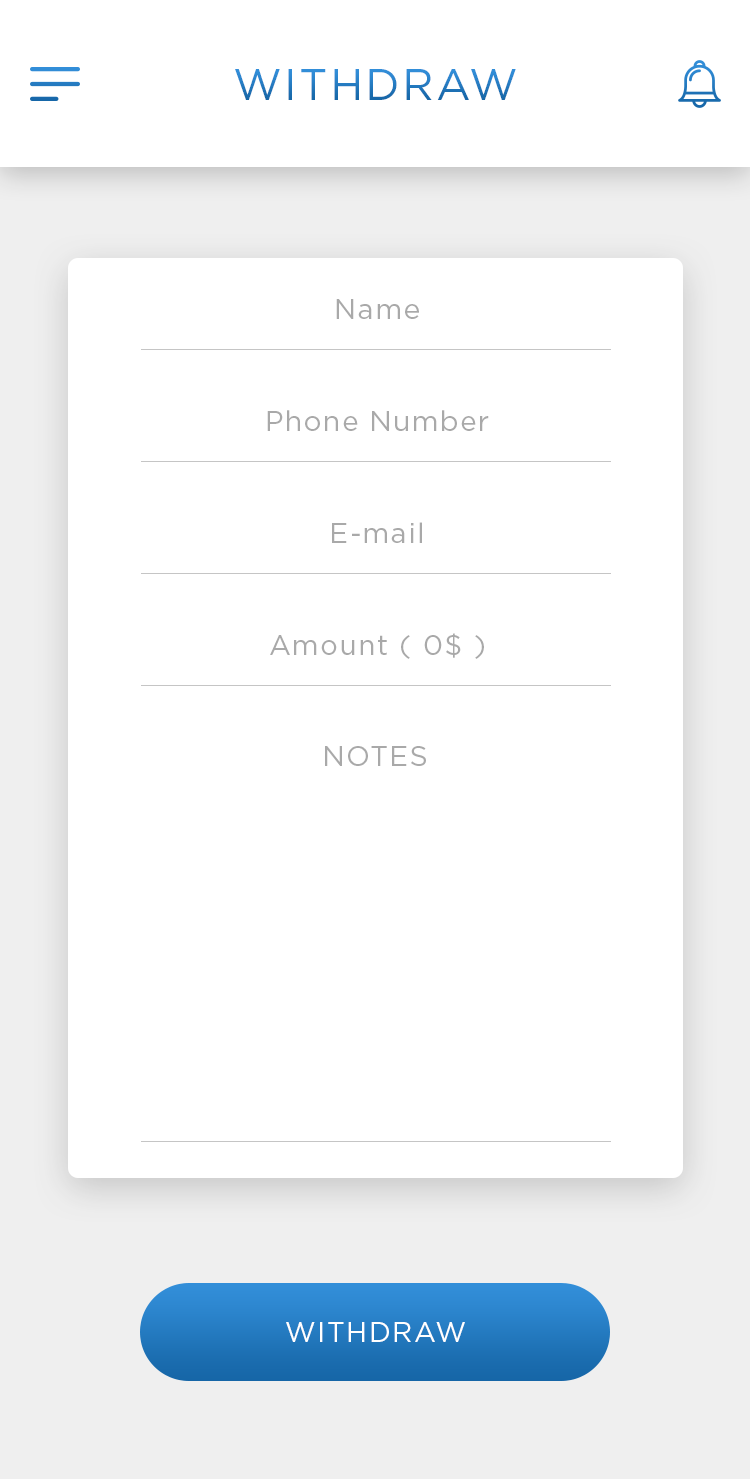
<style>
.page{position:relative;width:750px;height:1479px;background:#ffffff}
.page>*{position:absolute;margin:0}
.t1{font:44px "Gotham-Book";letter-spacing:0.05em;color:#257bc1;text-transform:uppercase}
.t2{font:28px "Gotham-Book";letter-spacing:0.05em;color:#a9a9a9}
.t3{font:28px "Gotham-Book";letter-spacing:0.05em;color:#ffffff;text-transform:uppercase}
</style>
<div class="page">
<p class="t1" style="left:235px;top:69px;width:281px;height:31px">Withdraw</p>
<p class="t2" style="left:336px;top:299px;width:83px;height:20px">Name</p>
<p class="t2" style="left:267px;top:410px;width:222px;height:21px">Phone Number</p>
<p class="t2" style="left:332px;top:522px;width:90px;height:21px">E-mail</p>
<p class="t2" style="left:270px;top:633px;width:214px;height:26px">Amount ( 0$ )</p>
<p class="t2" style="left:325px;top:746px;width:101px;height:20px">NOTES</p>
<p class="t3" style="left:286px;top:1322px;width:179px;height:20px">WITHDRAW</p>
</div>
